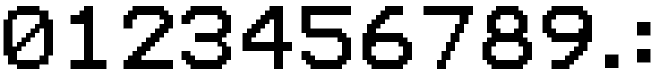
<style>
.page{position:relative;width:660px;height:75px;background:#ffffff}
.page>*{position:absolute;margin:0}
.t1{font:72px "Terminal";color:#000000}
</style>
<div class="page">
<p class="t1" style="left:3px;top:6px;width:50px;height:63px">0</p>
<p class="t1" style="left:70px;top:6px;width:37px;height:63px">1</p>
<p class="t1" style="left:123px;top:6px;width:50px;height:63px">2</p>
<p class="t1" style="left:181px;top:6px;width:50px;height:63px">3</p>
<p class="t1" style="left:242px;top:6px;width:50px;height:63px">4</p>
<p class="t1" style="left:301px;top:6px;width:50px;height:63px">5</p>
<p class="t1" style="left:362px;top:6px;width:50px;height:63px">6</p>
<p class="t1" style="left:423px;top:6px;width:50px;height:63px">7</p>
<p class="t1" style="left:482px;top:6px;width:50px;height:63px">8</p>
<p class="t1" style="left:542px;top:6px;width:50px;height:63px">9</p>
<p class="t1" style="left:637px;top:22px;width:14px;height:41px">:</p>
<p class="t1" style="left:605px;top:54px;width:14px;height:14px">.</p>
</div>
